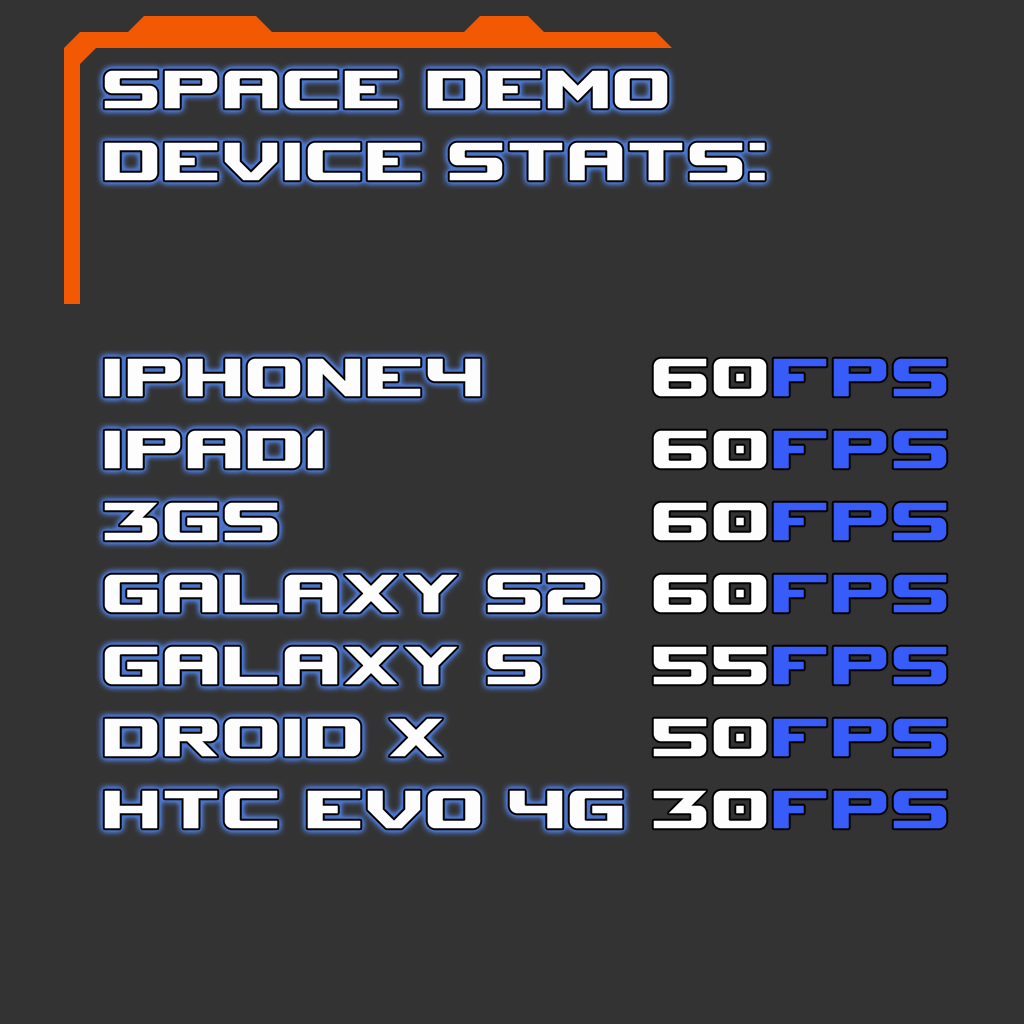
<style>
.page{position:relative;width:1024px;height:1024px;background:#333333}
.page>*{position:absolute;margin:0}
.t1{font:60px "SpaceMarine-Nominal";color:#fdfdfd}
.t2{font:60px "SpaceMarine-Nominal";color:#385cfa}
.t3{font:60px "SpaceMarine-Nominal";color:#ffffff}
</style>
<div class="page">
<p class="t1" style="left:104px;top:70px;width:661px;height:759px">SPACE DEMO<br>DEVICE STATS:<br><br><br>IPHONe4<br>IPAD1<br>3GS<br>Galaxy s2<br>GALAXY s<br>DROID X<br>HTC EVO 4g</p>
<p class="t2" style="left:653px;top:358px;width:294px;height:471px"><span class="t1">60</span>fps<br><span class="t1">60</span>fps<br><span class="t1">60</span>fps<br><span class="t3">60</span>fps<br><span class="t1">55</span>fps<br><span class="t1">50</span>fps<br><span class="t1">30</span>fps</p>
</div>
